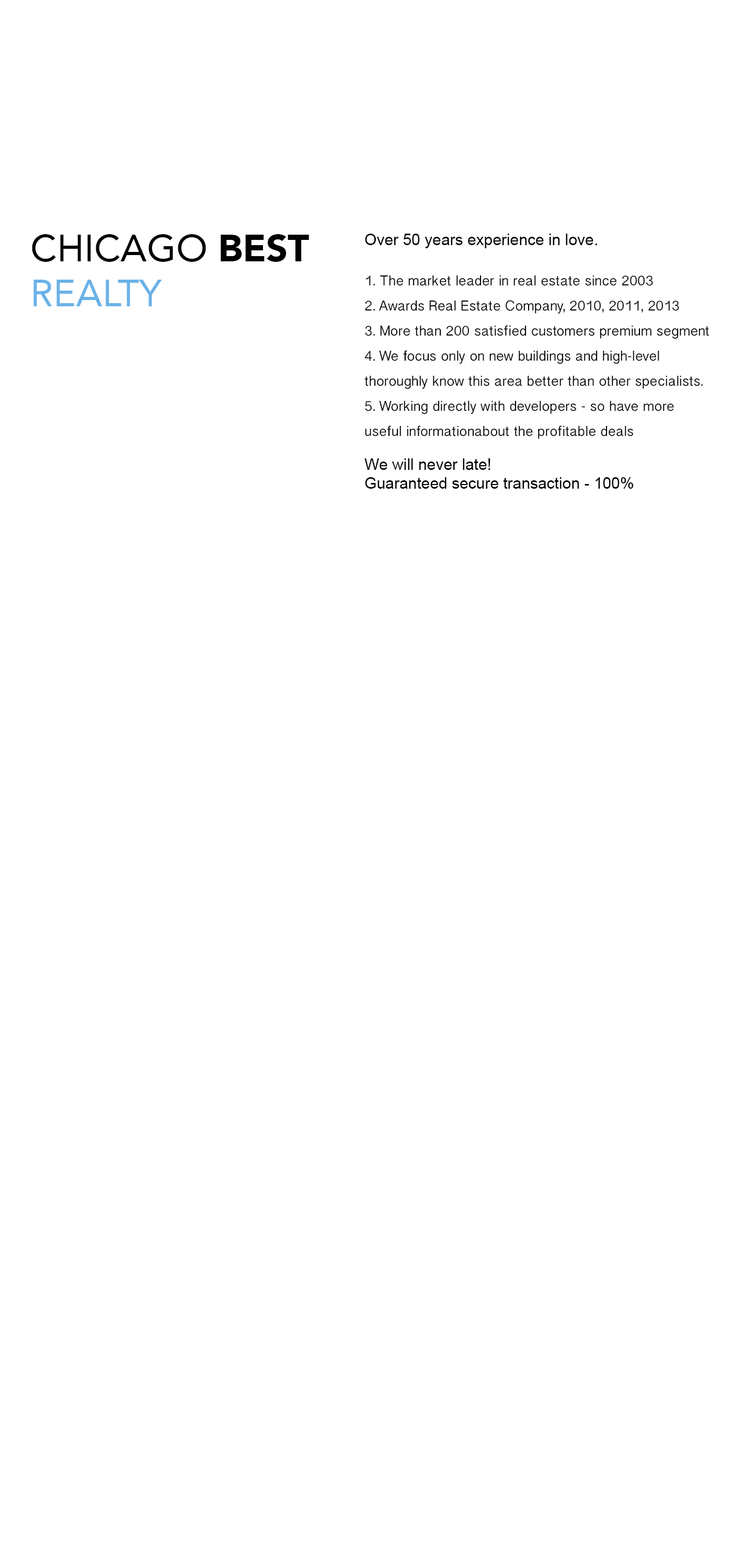
<style>
.page{position:relative;width:732px;height:1568px;background:#ffffff}
.page>*{position:absolute;margin:0}
.t1{font:12.5px/25.1px "BanglaSangamMN";color:#020202}
.t2{font:15.7px "ArialMT";color:#020202}
.t3{font:37.6px "Avenir-Roman";color:#020202}
.t4{font:37.6px "Avenir-Black";color:#020202}
.t5{font:37.6px "Avenir-Roman";color:#6ab2e8}
</style>
<div class="page">
<p class="t1" style="left:364px;top:234px;width:345px;height:255px"><span class="t2">Over 50 years experience in love.<br><br></span>1. The market leader in real estate since 2003 <br>2. Awards Real Estate Company, 2010, 2011, 2013 <br>3. More than 200 satisfied customers premium segment <br>4. We focus only on new buildings and high-level <br>thoroughly know this area better than other specialists.<br>5. Working directly with developers - so have more <br>useful informationabout the profitable deals<br><br><span class="t2">We will never late!<br>Guaranteed secure transaction - 100%</span></p>
<p class="t3" style="left:32px;top:234px;width:277px;height:72px">CHICAGO <span class="t4">BEST<br></span><span class="t5">REALTY</span></p>
</div>
